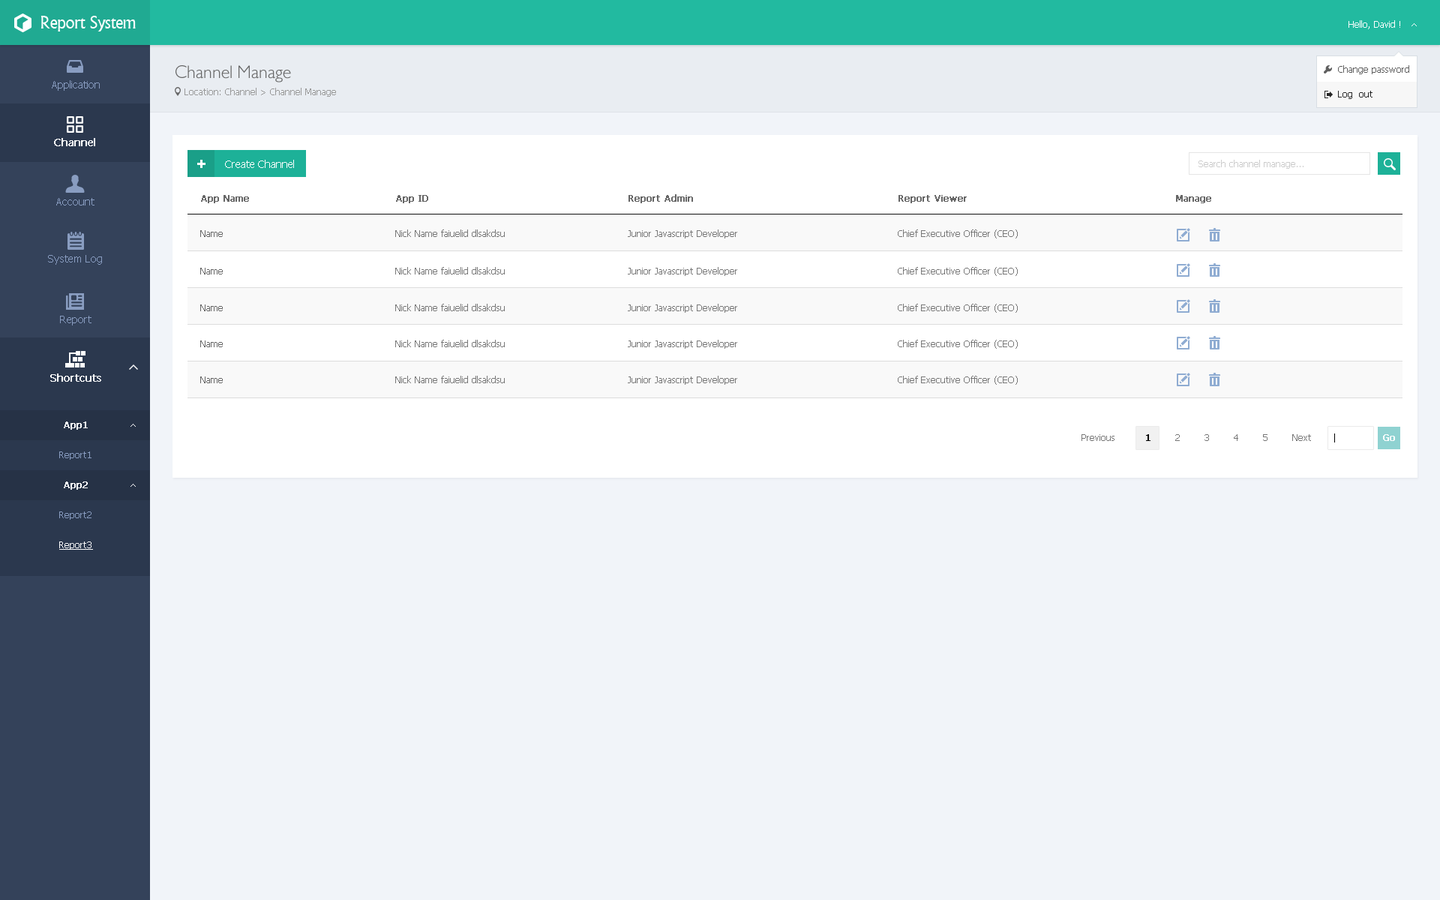
<style>
.page{position:relative;width:1440px;height:900px;background:#f1f4f9}
.page>*{position:absolute;margin:0}
.t1{font:18px "Narkisim";letter-spacing:-0.022em;color:#ffffff}
.t2{font:9px "Tahoma";color:#ffffff}
.t3{font:18px "084-CAI978";color:#666666}
.t4{font:9px "Tahoma";color:#5f5f5f}
.t5{font:10.5px "Tahoma";color:#899dc1}
.t6{font:9px "Tahoma";color:#999999}
.t7{font:9px "Tahoma";color:#262626}
.t8{font:10.5px "Tahoma";color:#ffffff;font-weight:bold}
.t9{font:10.5px "Tahoma";color:#ffffff}
.t10{font:9px "Tahoma";color:#cccccc}
.t11{font:9px "Tahoma";color:#666666;font-weight:bold}
.t12{font:9px "Tahoma";color:#666666}
.t13{font:9px "Tahoma";color:#777777}
.t14{font:9px "Tahoma";color:#ffffff;font-weight:bold}
.t15{font:9px "Tahoma";color:#000000;font-weight:bold}
.t16{font:9px "Tahoma";color:#899dc1}
.t17{font:9px "Tahoma";color:#ffffff;text-decoration:underline}
</style>
<div class="page">
<p class="t1" style="left:40px;top:16px;width:96px;height:16px">Report System</p>
<p class="t2" style="left:1348px;top:20px;width:52px;height:9px">Hello, David !</p>
<p class="t3" style="left:176px;top:65px;width:115px;height:17px">Channel Manage</p>
<p class="t4" style="left:1338px;top:65px;width:71px;height:9px">Change password</p>
<p class="t5" style="left:52px;top:80px;width:48px;height:11px">Application</p>
<p class="t6" style="left:184px;top:88px;width:152px;height:9px">Location: Channel &gt; Channel Manage</p>
<p class="t7" style="left:1338px;top:91px;width:34px;height:8px">Log  out</p>
<p class="t8" style="left:54px;top:138px;width:41px;height:8px">Channel</p>
<p class="t9" style="left:225px;top:160px;width:69px;height:8px">Create Channel</p>
<p class="t10" style="left:1198px;top:160px;width:106px;height:9px">Search channel manage...</p>
<p class="t5" style="left:56px;top:198px;width:38px;height:8px">Account</p>
<p class="t11" style="left:201px;top:195px;width:48px;height:8px">App Name</p>
<p class="t11" style="left:396px;top:195px;width:32px;height:8px">App ID</p>
<p class="t11" style="left:628px;top:194px;width:65px;height:9px">Report Admin</p>
<p class="t11" style="left:898px;top:195px;width:69px;height:8px">Report Viewer</p>
<p class="t11" style="left:1176px;top:195px;width:35px;height:8px">Manage</p>
<p class="t12" style="left:200px;top:230px;width:23px;height:7px">Name</p>
<p class="t13" style="left:395px;top:230px;width:110px;height:7px">Nick Name faiuelid dlsakdsu</p>
<p class="t13" style="left:628px;top:230px;width:109px;height:8px">Junior Javascript Developer</p>
<p class="t13" style="left:898px;top:230px;width:120px;height:8px">Chief Executive Officer (CEO)</p>
<p class="t5" style="left:48px;top:255px;width:54px;height:10px">System Log</p>
<p class="t12" style="left:200px;top:268px;width:23px;height:6px">Name</p>
<p class="t13" style="left:395px;top:267px;width:110px;height:7px">Nick Name faiuelid dlsakdsu</p>
<p class="t13" style="left:628px;top:267px;width:109px;height:9px">Junior Javascript Developer</p>
<p class="t13" style="left:898px;top:267px;width:120px;height:9px">Chief Executive Officer (CEO)</p>
<p class="t12" style="left:200px;top:304px;width:23px;height:7px">Name</p>
<p class="t13" style="left:395px;top:304px;width:110px;height:7px">Nick Name faiuelid dlsakdsu</p>
<p class="t13" style="left:628px;top:304px;width:109px;height:9px">Junior Javascript Developer</p>
<p class="t13" style="left:898px;top:304px;width:120px;height:9px">Chief Executive Officer (CEO)</p>
<p class="t5" style="left:60px;top:316px;width:32px;height:10px">Report</p>
<p class="t12" style="left:200px;top:340px;width:23px;height:7px">Name</p>
<p class="t13" style="left:395px;top:340px;width:110px;height:7px">Nick Name faiuelid dlsakdsu</p>
<p class="t13" style="left:628px;top:340px;width:109px;height:9px">Junior Javascript Developer</p>
<p class="t13" style="left:898px;top:340px;width:120px;height:9px">Chief Executive Officer (CEO)</p>
<p class="t8" style="left:50px;top:374px;width:51px;height:8px">Shortcuts</p>
<p class="t12" style="left:200px;top:376px;width:23px;height:7px">Name</p>
<p class="t13" style="left:395px;top:376px;width:110px;height:7px">Nick Name faiuelid dlsakdsu</p>
<p class="t13" style="left:628px;top:376px;width:109px;height:9px">Junior Javascript Developer</p>
<p class="t13" style="left:898px;top:376px;width:120px;height:9px">Chief Executive Officer (CEO)</p>
<p class="t14" style="left:64px;top:422px;width:24px;height:8px">App1</p>
<p class="t13" style="left:1082px;top:434px;width:229px;height:7px">Previous          <span class="t15">1</span>        2        3        4        5        Next</p>
<p class="t14" style="left:1383px;top:434px;width:12px;height:7px">Go</p>
<p class="t16" style="left:59px;top:452px;width:33px;height:8px">Report1</p>
<p class="t14" style="left:64px;top:482px;width:24px;height:8px">App2</p>
<p class="t16" style="left:59px;top:512px;width:33px;height:8px">Report2</p>
<p class="t17" style="left:59px;top:542px;width:34px;height:8px">Report3</p>
</div>
